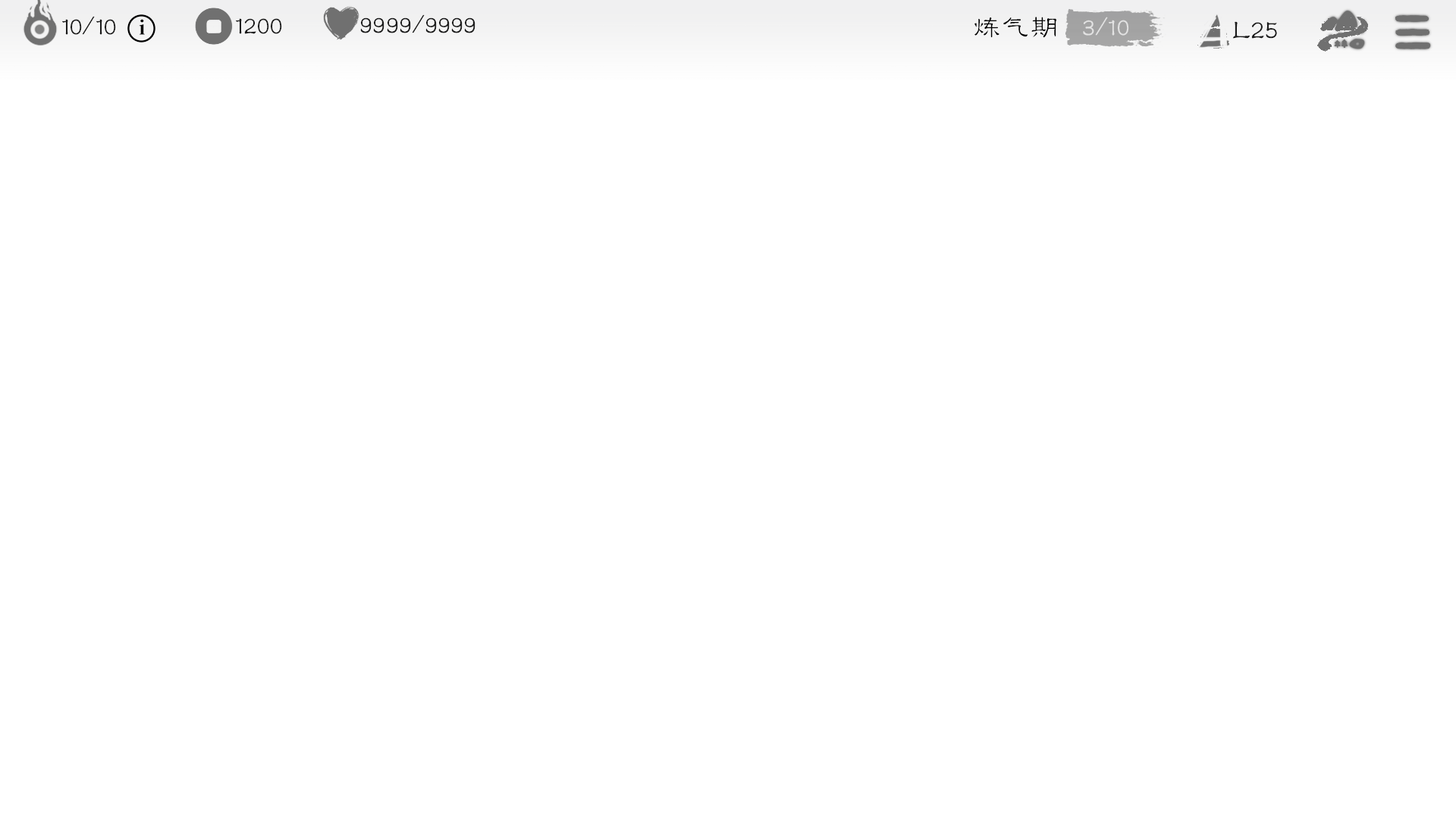
<style>
.page{position:relative;width:1456px;height:819px;background:#ffffff}
.page>*{position:absolute;margin:0}
.t1{font:25.2px "FZLBJW--GB1-0";color:#1b1b1b}
.t2{font:28.3px "FZLBJW--GB1-0";color:#000000}
.t3{font:25px "FZLBJW--GB1-0";color:#e3e3e3}
.t4{font:26.7px "FZLBJW--GB1-0";color:#1b1b1b}
</style>
<div class="page">
<p class="t1" style="left:62px;top:16px;width:54px;height:19px">10/10</p>
<p class="t1" style="left:360px;top:14px;width:115px;height:19px">9999/9999</p>
<p class="t2" style="left:974px;top:17px;width:82px;height:21px">炼气期</p>
<p class="t3" style="left:1083px;top:17px;width:46px;height:19px">3/10</p>
<p class="t1" style="left:236px;top:18px;width:46px;height:16px">1200</p>
<p class="t4" style="left:1233px;top:21px;width:44px;height:18px">L25</p>
</div>
